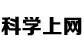
<style>
.page{position:relative;width:84px;height:50px;background:#ffffff}
.page>*{position:absolute;margin:0}
.t1{font:20px "FZZCHJW--GB1-0";color:#000000;font-weight:bold}
</style>
<div class="page">
<p class="t1" style="left:1px;top:16px;width:81px;height:20px">科学上网</p>
</div>
